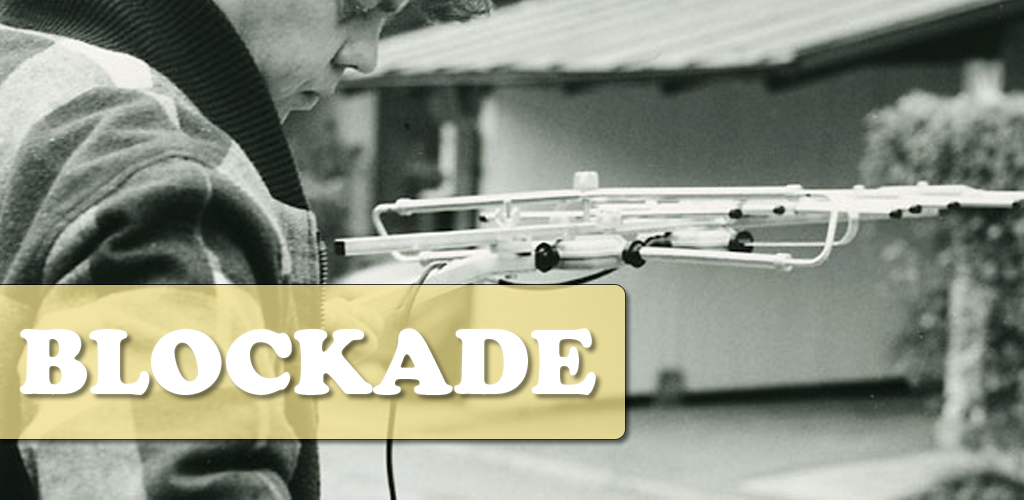
<style>
.page{position:relative;width:1024px;height:500px}
.page>*{position:absolute;margin:0}
.t1{font:91.7px "CooperBlackStd";color:#ffffff}
</style>
<div class="page">
<p class="t1" style="left:20px;top:328px;width:576px;height:67px">BLOCKADE</p>
</div>
